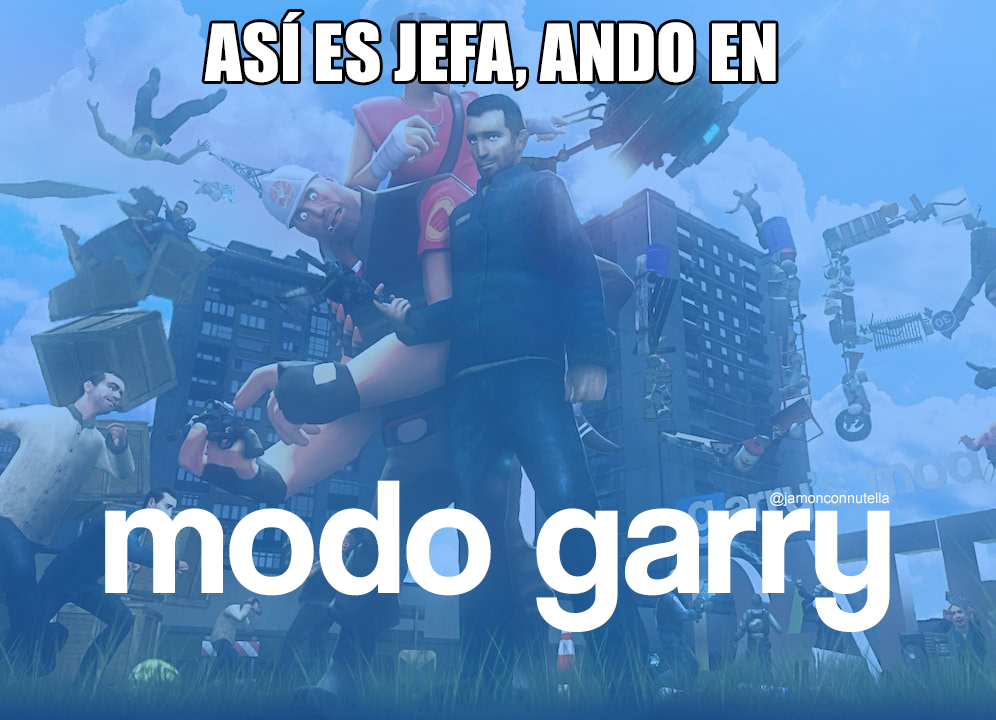
<style>
.page{position:relative;width:996px;height:720px}
.page>*{position:absolute;margin:0}
.t1{font:72.8px "Impact";color:#ffffff}
.t2{font:167px "CoolveticaRg-Regular";color:#ffffff}
.t3{font:14.5px "ArialMT";color:#ffffff}
</style>
<div class="page">
<p class="t1" style="left:204px;top:12px;width:572px;height:77px">ASÍ ES JEFA, ANDO EN</p>
<p class="t2" style="left:105px;top:480px;width:785px;height:152px">modo garry</p>
<p class="t3" style="left:770px;top:492px;width:119px;height:14px">@jamonconnutella</p>
</div>
